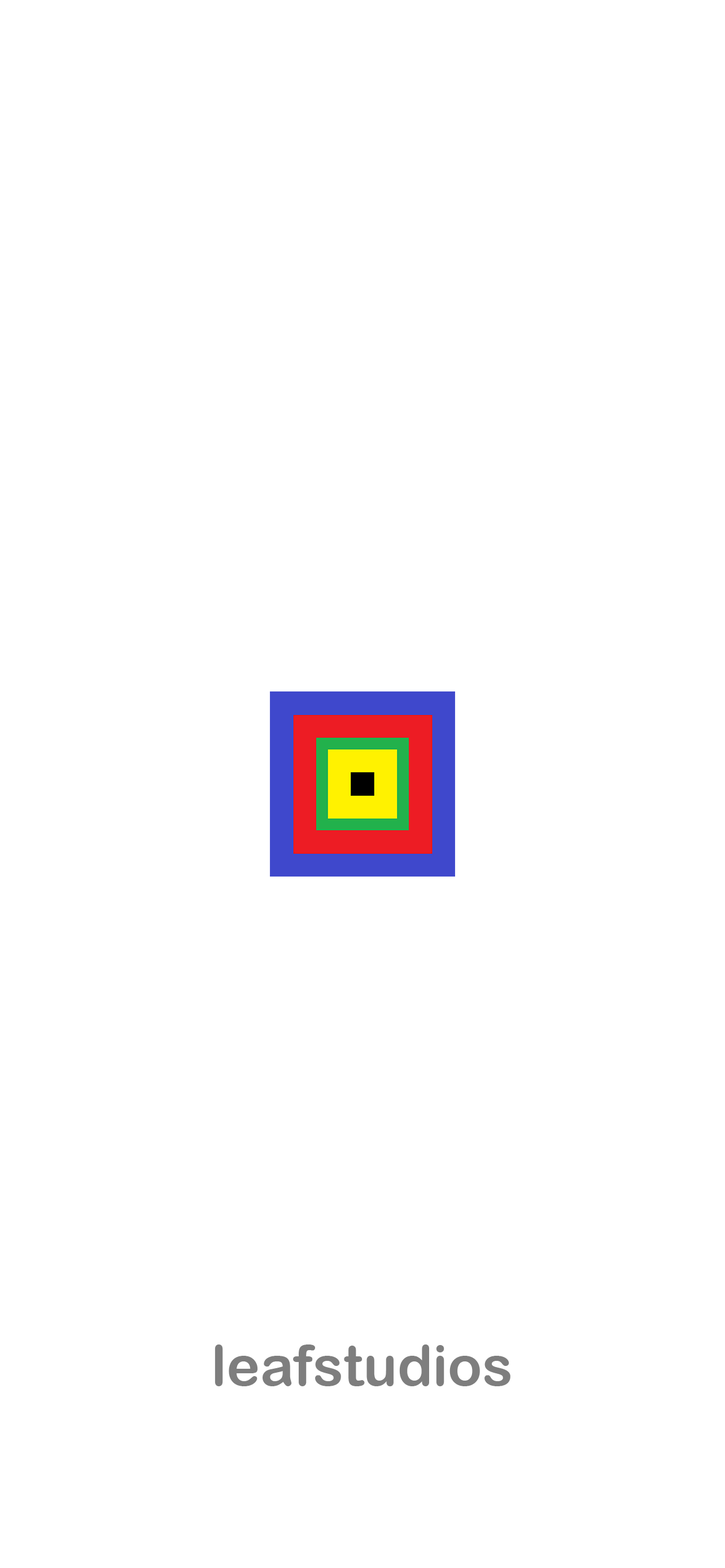
<style>
.page{position:relative;width:725px;height:1568px;background:#ffffff}
.page>*{position:absolute;margin:0}
.t1{font:56.4px "ArialRoundedMTBold";color:#7e7e7e}
</style>
<div class="page">
<p class="t1" style="left:214px;top:1344px;width:296px;height:42px">leafstudios</p>
</div>
